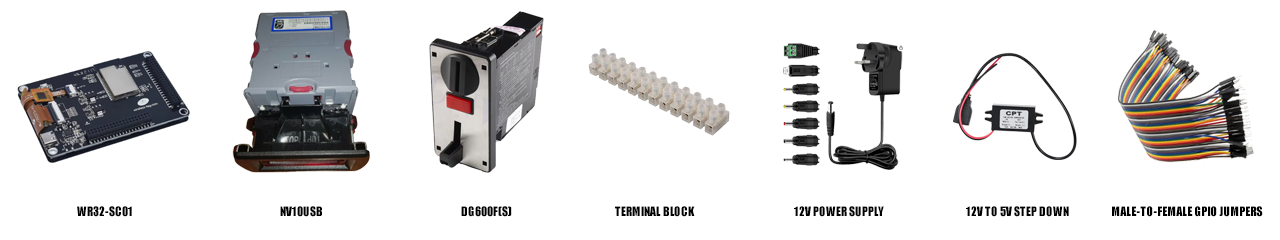
<style>
.page{position:relative;width:1280px;height:240px;background:#ffffff}
.page>*{position:absolute;margin:0}
.t1{font:12px "Impact";color:#000000}
</style>
<div class="page">
<p class="t1" style="left:77px;top:206px;width:55px;height:11px">WR32-SC01</p>
<p class="t1" style="left:280px;top:206px;width:42px;height:11px">NV10USB</p>
<p class="t1" style="left:461px;top:206px;width:51px;height:11px">DG600F(S)</p>
<p class="t1" style="left:615px;top:206px;width:80px;height:11px">TERMINAL BLOCK</p>
<p class="t1" style="left:794px;top:206px;width:90px;height:11px">12V POWER SUPPLY</p>
<p class="t1" style="left:966px;top:206px;width:103px;height:11px">12V TO 5V STEP DOWN</p>
<p class="t1" style="left:1112px;top:206px;width:151px;height:11px">MALE-TO-FEMALE GPIO JUMPERS</p>
</div>
